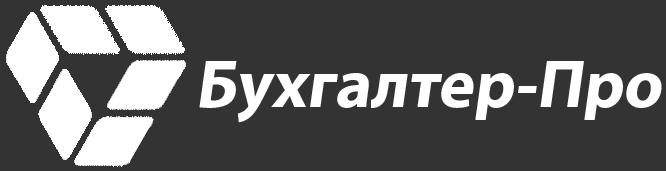
<style>
.page{position:relative;width:666px;height:171px;background:#333333}
.page>*{position:absolute;margin:0}
.t1{font:68.7px "MyriadPro-Bold";color:#ffffff}
</style>
<div class="page">
<p class="t1" style="left:199px;top:61px;width:463px;height:62px">Бухгалтер-Про</p>
</div>
